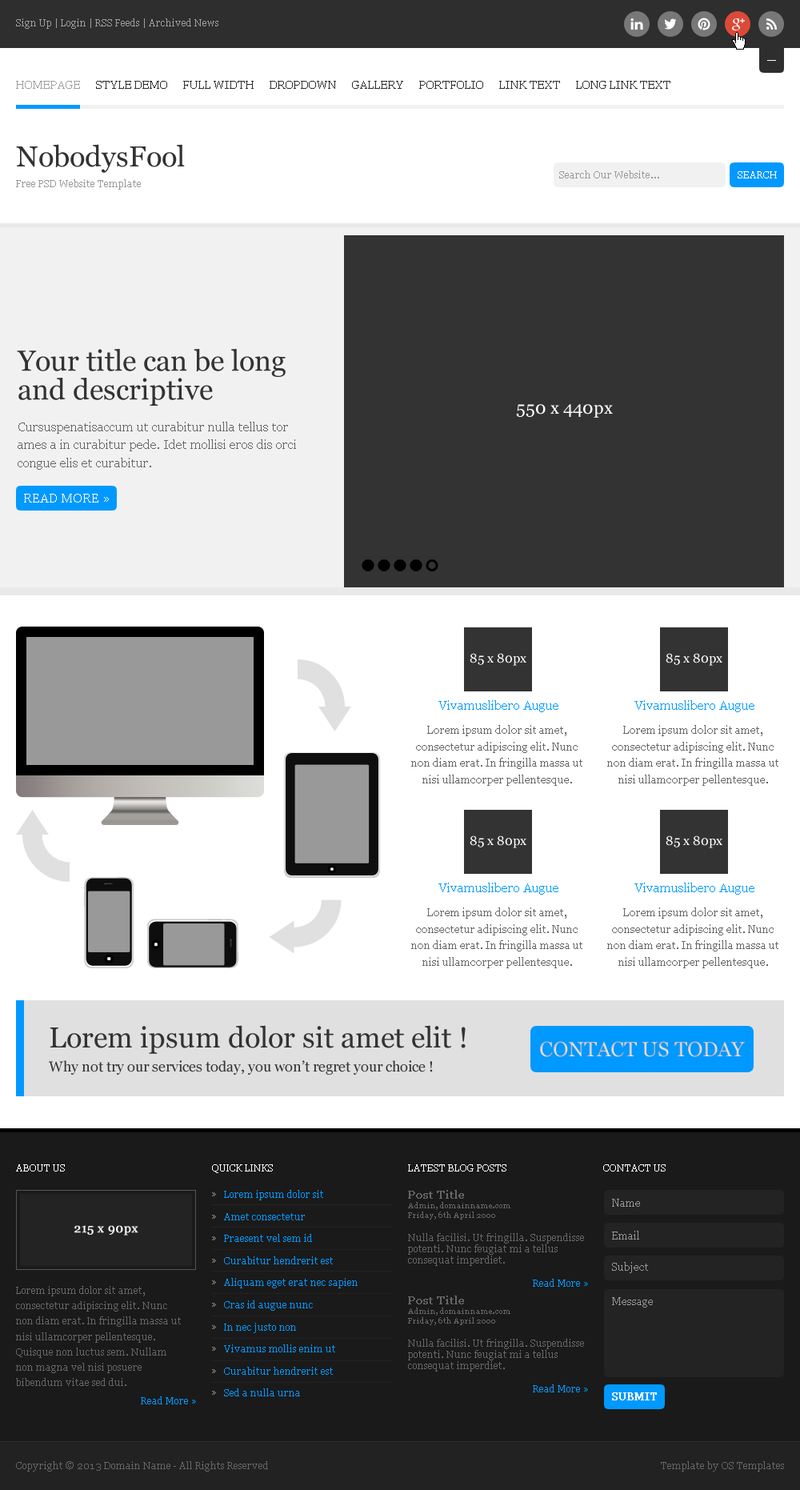
<style>
.page{position:relative;width:800px;height:1490px;background:#ffffff}
.page>*{position:absolute;margin:0}
.t1{font:9.6px "Georgia";color:#9f9f9f}
.t2{font:11.2px "Georgia";color:#9f9f9f}
.t3{font:11.2px "Georgia";color:#2e2e2e}
.t4{font:28.8px "Georgia";color:#333333}
.t5{font:9.6px "Georgia";color:#999999}
.t6{font:9.6px "Georgia";color:#ffffff}
.t7{font:28.8px/28.8px "Georgia";color:#333333}
.t8{font:17.6px "Georgia";color:#ffffff}
.t9{font:12.8px/17.9px "Georgia";color:#666666}
.t10{font:12.8px "Georgia";color:#ffffff}
.t11{font:12.8px "Georgia";color:#0099ff}
.t12{font:10.4px/16.6px "Georgia";color:#666666}
.t13{font:20.8px "Georgia";color:#dcd0d0}
.t14{font:14.4px "Georgia";color:#333333}
.t15{font:9.6px/22.1px "Georgia";color:#989898}
.t16{font:9.6px/22.1px "Georgia";color:#0099ff}
.t17{font:9.6px/11.5px "Georgia";color:#666666}
.t18{font:11.2px/13.4px "Georgia";color:#666666;font-weight:bold}
.t19{font:8px/9.6px "Georgia";color:#666666}
.t20{font:10.4px "Georgia";color:#989898}
.t21{font:12.5px "Georgia";color:#f8f8f8;font-weight:bold}
.t22{font:9.6px/15.4px "Georgia";color:#666666}
.t23{font:9.6px "Georgia";color:#0099ff}
.t24{font:10.4px "Georgia";color:#ffffff;font-weight:bold}
.t25{font:9.6px "Georgia";color:#666666}
</style>
<div class="page">
<p class="t1" style="left:16px;top:18px;width:202px;height:11px">Sign Up | Login | RSS Feeds | Archived News</p>
<p class="t2" style="left:16px;top:81px;width:64px;height:8px">HOMEPAGE</p>
<p class="t3" style="left:96px;top:81px;width:71px;height:8px">STYLE DEMO</p>
<p class="t3" style="left:183px;top:81px;width:71px;height:8px">FULL WIDTH</p>
<p class="t3" style="left:270px;top:81px;width:66px;height:8px">DROPDOWN</p>
<p class="t3" style="left:352px;top:81px;width:51px;height:8px">GALLERY</p>
<p class="t3" style="left:419px;top:81px;width:64px;height:8px">PORTFOLIO</p>
<p class="t3" style="left:499px;top:81px;width:61px;height:8px">LINK TEXT</p>
<p class="t3" style="left:576px;top:81px;width:95px;height:8px">LONG LINK TEXT</p>
<p class="t4" style="left:16px;top:144px;width:169px;height:29px">NobodysFool</p>
<p class="t5" style="left:559px;top:170px;width:100px;height:8px">Search Our Website...</p>
<p class="t6" style="left:738px;top:171px;width:39px;height:7px">SEARCH</p>
<p class="t5" style="left:16px;top:179px;width:125px;height:11px">Free PSD Website Template</p>
<p class="t7" style="left:17px;top:349px;width:269px;height:57px">Your title can be long and descriptive</p>
<p class="t8" style="left:516px;top:404px;width:97px;height:14px">550 x 440px</p>
<p class="t9" style="left:18px;top:422px;width:278px;height:48px">Cursuspenatisaccum ut curabitur nulla tellus tor ames a in curabitur pede. Idet mollisi eros dis orci congue elis et curabitur.</p>
<p class="t10" style="left:24px;top:494px;width:85px;height:9px">READ MORE »</p>
<p class="t10" style="left:470px;top:653px;width:57px;height:13px">85 x 80px</p>
<p class="t10" style="left:666px;top:653px;width:57px;height:13px">85 x 80px</p>
<p class="t11" style="left:439px;top:700px;width:120px;height:12px">Vivamuslibero Augue</p>
<p class="t11" style="left:635px;top:700px;width:120px;height:12px">Vivamuslibero Augue</p>
<p class="t12" style="left:411px;top:725px;width:172px;height:61px;text-align:center">Lorem ipsum dolor sit amet, consectetur adipiscing elit. Nunc non diam erat. In fringilla massa ut nisi ullamcorper pellentesque.</p>
<p class="t12" style="left:607px;top:725px;width:172px;height:61px;text-align:center">Lorem ipsum dolor sit amet, consectetur adipiscing elit. Nunc non diam erat. In fringilla massa ut nisi ullamcorper pellentesque.</p>
<p class="t10" style="left:470px;top:835px;width:57px;height:13px">85 x 80px</p>
<p class="t10" style="left:666px;top:835px;width:57px;height:13px">85 x 80px</p>
<p class="t11" style="left:439px;top:883px;width:120px;height:12px">Vivamuslibero Augue</p>
<p class="t11" style="left:635px;top:883px;width:120px;height:12px">Vivamuslibero Augue</p>
<p class="t12" style="left:411px;top:907px;width:172px;height:61px;text-align:center">Lorem ipsum dolor sit amet, consectetur adipiscing elit. Nunc non diam erat. In fringilla massa ut nisi ullamcorper pellentesque.</p>
<p class="t12" style="left:607px;top:907px;width:172px;height:61px;text-align:center">Lorem ipsum dolor sit amet, consectetur adipiscing elit. Nunc non diam erat. In fringilla massa ut nisi ullamcorper pellentesque.</p>
<p class="t4" style="left:50px;top:1025px;width:416px;height:29px">Lorem ipsum dolor sit amet elit !</p>
<p class="t13" style="left:540px;top:1041px;width:205px;height:16px">CONTACT US TODAY</p>
<p class="t14" style="left:49px;top:1060px;width:384px;height:15px">Why not try our services today, you won’t regret your choice !</p>
<p class="t6" style="left:16px;top:1164px;width:49px;height:8px">ABOUT US</p>
<p class="t6" style="left:212px;top:1164px;width:61px;height:9px">QUICK LINKS</p>
<p class="t6" style="left:408px;top:1164px;width:99px;height:8px">LATEST BLOG POSTS</p>
<p class="t6" style="left:603px;top:1164px;width:63px;height:8px">CONTACT US</p>
<p class="t15" style="left:212px;top:1192px;width:4px;height:203px">»<br>»<br>»<br>»<br>»<br>»<br>»<br>»<br>»<br>»</p>
<p class="t16" style="left:224px;top:1190px;width:134px;height:206px">Lorem ipsum dolor sit<br>Amet consectetur<br>Praesent vel sem id<br>Curabitur hendrerit est<br>Aliquam eget erat nec sapien<br>Cras id augue nunc<br>In nec justo non<br>Vivamus mollis enim ut<br>Curabitur hendrerit est<br>Sed a nulla urna</p>
<p class="t17" style="left:408px;top:1190px;width:176px;height:76px"><span class="t18">Post Title<br></span><span class="t19">Admin, domainname.com<br>Friday, 6th April 2000<br></span><br>Nulla facilisi. Ut fringilla. Suspendisse potenti. Nunc feugiat mi a tellus consequat imperdiet.</p>
<p class="t20" style="left:612px;top:1199px;width:28px;height:8px">Name</p>
<p class="t21" style="left:74px;top:1225px;width:64px;height:11px">215 x 90px</p>
<p class="t20" style="left:612px;top:1231px;width:27px;height:9px">Email</p>
<p class="t20" style="left:612px;top:1262px;width:36px;height:11px">Subject</p>
<p class="t22" style="left:16px;top:1286px;width:165px;height:100px">Lorem ipsum dolor sit amet, consectetur adipiscing elit. Nunc non diam erat. In fringilla massa ut nisi ullamcorper pellentesque. Quisque non luctus sem. Nullam non magna vel nisi posuere bibendum vitae sed dui.</p>
<p class="t23" style="left:533px;top:1279px;width:55px;height:8px">Read More »</p>
<p class="t17" style="left:408px;top:1296px;width:176px;height:76px"><span class="t18">Post Title<br></span><span class="t19">Admin, domainname.com<br>Friday, 6th April 2000<br></span><br>Nulla facilisi. Ut fringilla. Suspendisse potenti. Nunc feugiat mi a tellus consequat imperdiet.</p>
<p class="t20" style="left:612px;top:1297px;width:41px;height:11px">Message</p>
<p class="t23" style="left:533px;top:1384px;width:55px;height:8px">Read More »</p>
<p class="t23" style="left:141px;top:1396px;width:55px;height:8px">Read More »</p>
<p class="t24" style="left:612px;top:1392px;width:45px;height:8px">SUBMIT</p>
<p class="t25" style="left:16px;top:1461px;width:252px;height:11px">Copyright © 2013 Domain Name - All Rights Reserved</p>
<p class="t25" style="left:661px;top:1461px;width:123px;height:11px">Template by OS Templates</p>
</div>
